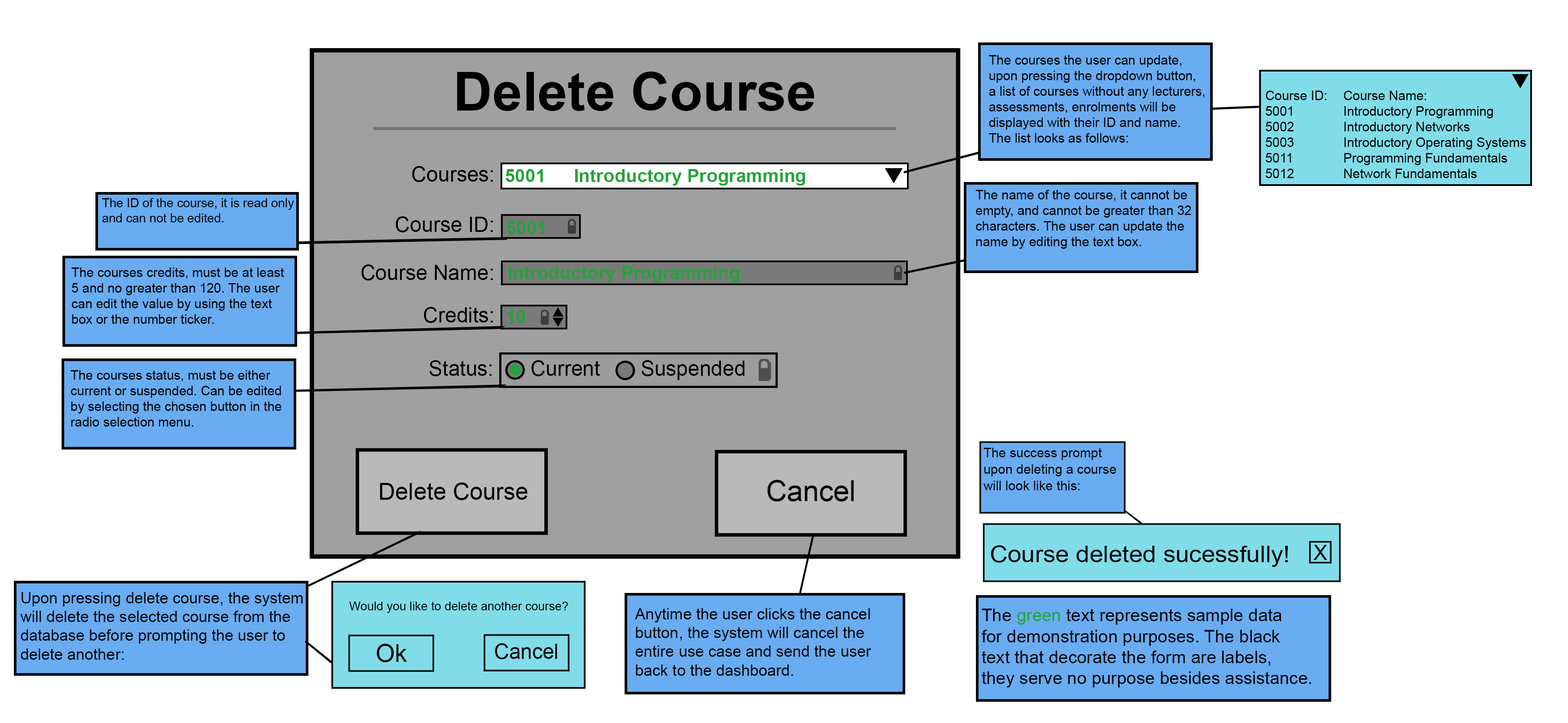
<style>
.page{position:relative;width:1568px;height:723px;background:#ffffff}
.page>*{position:absolute;margin:0}
.t1{font:13px "ArialMT";color:#000000}
.t2{font:54px "Arial-BoldMT";color:#000000}
.t3{font:20.8px "ArialMT";color:#000000}
.t4{font:18.4px "Arial-BoldMT";color:#21a439}
.t5{font:12.4px "ArialMT";color:#000000}
.t6{font:20.9px "ArialMT";color:#000000}
.t7{font:13.6px "ArialMT";color:#000000;scale:0.97 1}
.t8{font:23.5px "ArialMT";color:#000000}
.t9{font:28.9px "ArialMT";color:#000000}
.t10{font:23.2px "ArialMT";color:#000000;scale:1.06 1}
.t11{font:15.6px "ArialMT";color:#000000}
.t12{font:12.1px "ArialMT";color:#000000}
.t13{font:17.5px "ArialMT";color:#000000}
.t14{font:17.5px "ArialMT";color:#21a439}
.t15{font:24.7px "ArialMT";color:#000000}
.t16{font:20.7px "ArialMT";color:#000000}
</style>
<div class="page">
<p class="t1" style="left:989px;top:55px;width:216px;height:88px">The courses the user can update,<br>upon pressing the dropdown button,<br>a list of courses without any lecturers,<br>assessments, enrolments will be <br>displayed with their ID and name. <br>The list looks as follows:</p>
<p class="t2" style="left:457px;top:72px;width:357px;height:39px">Delete Course</p>
<p class="t1" style="left:1266px;top:91px;width:260px;height:87px">Course ID:  Course Name:<br>5001    Introductory Programming<br>5002    Introductory Networks<br>5003    Introductory Operating Systems<br>5011    Programming Fundamentals<br>5012    Network Fundamentals</p>
<p class="t3" style="left:412px;top:166px;width:81px;height:16px">Courses:</p>
<p class="t4" style="left:505px;top:169px;width:300px;height:17px">5001   Introductory Programming</p>
<p class="t1" style="left:975px;top:190px;width:216px;height:59px">The name of the course, it cannot be<br>empty, and cannot be greater than 32<br>characters. The user can update the<br>name by editing the text box.</p>
<p class="t5" style="left:102px;top:198px;width:192px;height:25px">The ID of the course, it is read only<br>and can not be edited.</p>
<p class="t3" style="left:396px;top:216px;width:97px;height:16px">Course ID:</p>
<p class="t4" style="left:507px;top:221px;width:37px;height:13px">5001</p>
<p class="t1" style="left:72px;top:268px;width:212px;height:56px">The courses credits, must be at least<br>5 and no greater than 120. The user<br>can edit the value by using the text<br>box or the number ticker.</p>
<p class="t6" style="left:361px;top:265px;width:132px;height:16px">Course Name:</p>
<p class="t4" style="left:508px;top:266px;width:231px;height:17px">Introductory Programming</p>
<p class="t6" style="left:424px;top:307px;width:69px;height:16px">Credits:</p>
<p class="t4" style="left:507px;top:310px;width:18px;height:13px">10</p>
<p class="t3" style="left:429px;top:360px;width:63px;height:16px">Status:</p>
<p class="t3" style="left:531px;top:360px;width:69px;height:16px">Current</p>
<p class="t3" style="left:642px;top:360px;width:103px;height:20px">Suspended</p>
<p class="t1" style="left:71px;top:370px;width:211px;height:57px">The courses status, must be either<br>current or suspended. Can be edited<br>by selecting the chosen button in the<br>radio selection menu.</p>
<p class="t7" style="left:983px;top:448px;width:133px;height:43px">The success prompt<br>upon deleting a course<br>will look like this:</p>
<p class="t8" style="left:380px;top:483px;width:147px;height:18px">Delete Course</p>
<p class="t9" style="left:767px;top:480px;width:87px;height:22px">Cancel</p>
<p class="t10" style="left:991px;top:546px;width:297px;height:21px">Course deleted sucessfully!</p>
<p class="t3" style="left:1313px;top:545px;width:14px;height:15px">X</p>
<p class="t11" style="left:20px;top:593px;width:283px;height:67px">Upon pressing delete course, the system<br>will delete the selected course from the <br>database before prompting the user to<br>delete another:</p>
<p class="t12" style="left:349px;top:602px;width:219px;height:11px">Would you like to delete another course?</p>
<p class="t11" style="left:635px;top:609px;width:236px;height:67px">Anytime the user clicks the cancel<br>button, the system will cancel the<br>entire use case and send the user <br>back to the dashboard.</p>
<p class="t13" style="left:982px;top:609px;width:329px;height:79px">The <span class="t14">green </span>text represents sample data<br>for demonstration purposes. The black<br>text that decorate the form are labels,<br>they serve no purpose besides assistance.</p>
<p class="t15" style="left:376px;top:644px;width:31px;height:19px">Ok</p>
<p class="t16" style="left:495px;top:644px;width:62px;height:16px">Cancel</p>
</div>
